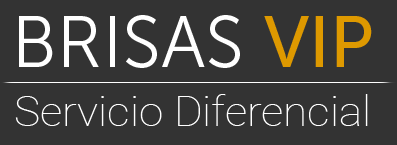
<style>
.page{position:relative;width:397px;height:145px;background:#333333}
.page>*{position:absolute;margin:0}
.t1{font:72px "MuseoSans-300";color:#ffffff}
.t2{font:72px "MuseoSans-500";color:#de9900}
.t3{font:41.8px "Roboto-Thin";color:#ffffff;scale:1.05 1}
</style>
<div class="page">
<p class="t1" style="left:19px;top:15px;width:353px;height:53px">BRISAS <span class="t2">VIP</span></p>
<p class="t3" style="left:15px;top:94px;width:353px;height:32px">Servicio Diferencial</p>
</div>
